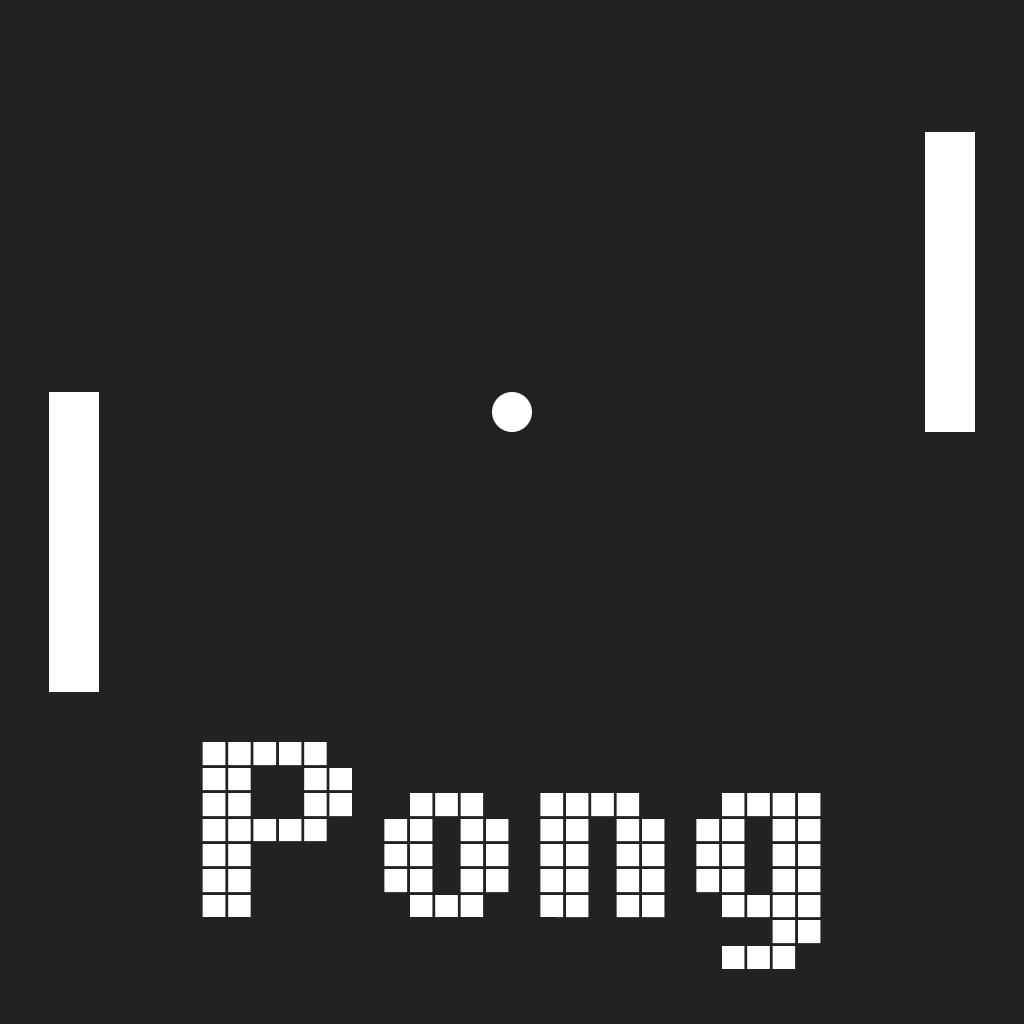
<style>
.page{position:relative;width:1024px;height:1024px;background:#222222}
.page>*{position:absolute;margin:0}
.t1{font:250px "LLPixel";letter-spacing:0.025em;color:#fefffe}
</style>
<div class="page">
<p class="t1" style="left:202px;top:742px;width:619px;height:227px">Pong</p>
</div>
